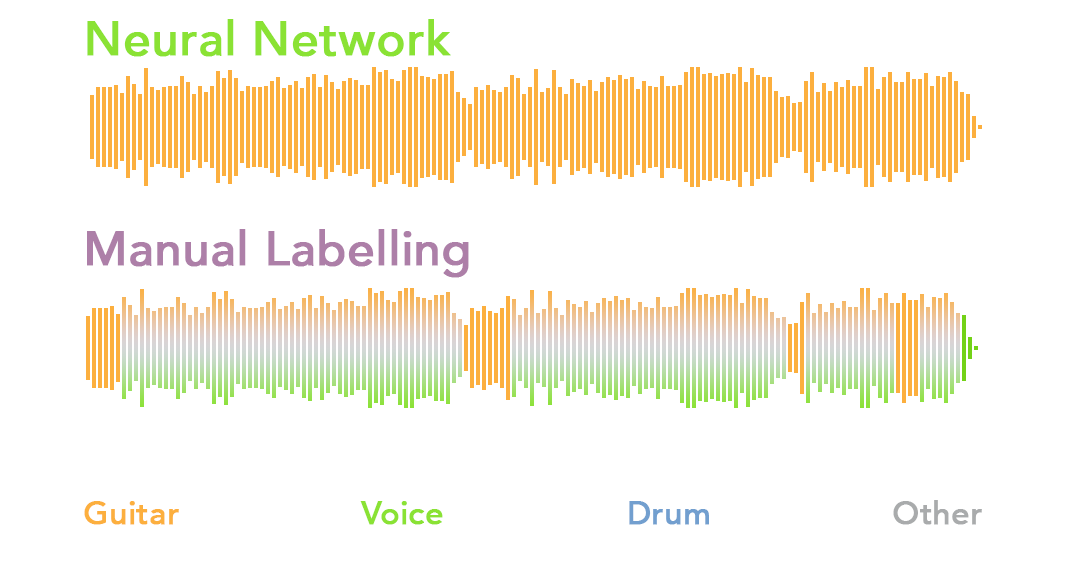
<style>
.page{position:relative;width:1080px;height:576px;background:#ffffff}
.page>*{position:absolute;margin:0}
.t1{font:48px "Avenir-Medium";color:#8ae234;font-weight:bold}
.t2{font:48px "Avenir-Medium";color:#ad7fa8;font-weight:bold}
.t3{font:32px "Avenir-Medium";color:#fcaf3e;font-weight:bold}
.t4{font:32px "Avenir-Medium";color:#8ae234;font-weight:bold}
.t5{font:32px "Avenir-Medium";color:#729fcf;font-weight:bold}
.t6{font:32px "Avenir-Medium";color:#a9abac;font-weight:bold}
</style>
<div class="page">
<p class="t1" style="left:87px;top:19px;width:364px;height:38px">Neural Network</p>
<p class="t2" style="left:87px;top:229px;width:382px;height:49px">Manual Labelling</p>
<p class="t3" style="left:84px;top:501px;width:95px;height:24px">Guitar</p>
<p class="t4" style="left:360px;top:501px;width:83px;height:24px">Voice</p>
<p class="t5" style="left:629px;top:501px;width:80px;height:24px">Drum</p>
<p class="t6" style="left:893px;top:500px;width:89px;height:25px">Other</p>
</div>
